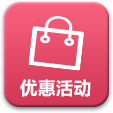
<style>
.page{position:relative;width:113px;height:113px}
.page>*{position:absolute;margin:0}
.t1{font:17.8px "MicrosoftYaHei-Bold";letter-spacing:0.025em;color:#ffffff}
</style>
<div class="page">
<p class="t1" style="left:20px;top:79px;width:71px;height:18px">优惠活动</p>
</div>
